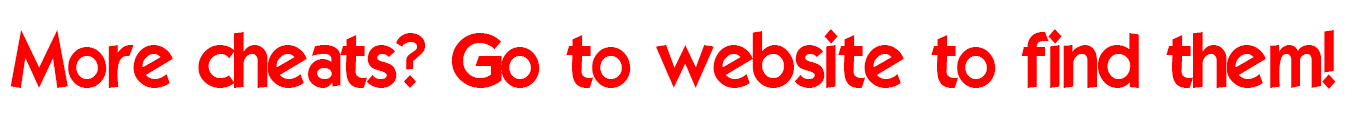
<style>
.page{position:relative;width:1358px;height:120px;background:#ffffff}
.page>*{position:absolute;margin:0}
.t1{font:75px "ELEGANCE";color:#ff0000}
</style>
<div class="page">
<p class="t1" style="left:10px;top:29px;width:1326px;height:60px">More cheats? Go to website to find them!</p>
</div>
